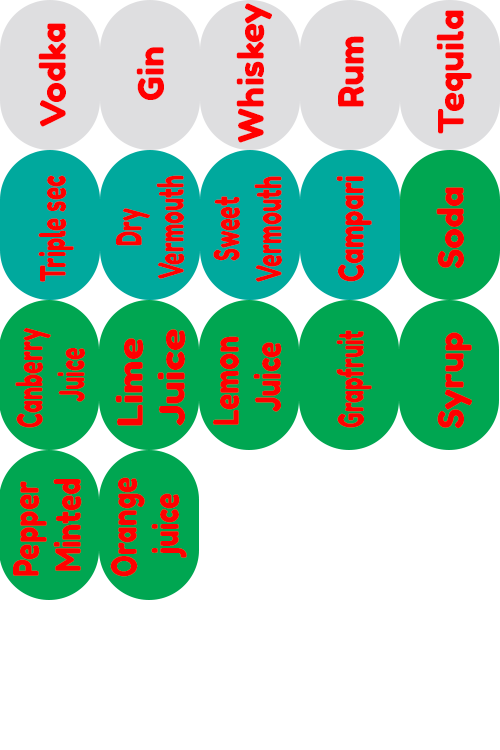
<style>
.page{position:relative;width:500px;height:750px;background:#ffffff}
.page>*{position:absolute;margin:0}
.t1{font:35px "FredokaOne-Regular";color:#ff0000}
.t2{font:35px "FredokaOne-Regular";color:#ff0000;scale:0.66 1}
.t3{font:35px "FredokaOne-Regular";color:#ff0000;scale:0.62 1}
.t4{font:35px "FredokaOne-Regular";color:#ff0000;scale:0.63 1}
.t5{font:35px "FredokaOne-Regular";color:#ff0000;scale:0.76 1}
.t6{font:35px "FredokaOne-Regular";color:#ff0000;scale:1.13 1}
.t7{font:35px "FredokaOne-Regular";color:#ff0000;scale:0.81 1}
.t8{font:35px "FredokaOne-Regular";color:#ff0000;scale:0.8 1}
</style>
<div class="page">
<p class="t1" style="left:236px;top:3px;width:36px;height:140px;rotate:-90deg">Whiskey</p>
<p class="t1" style="left:436px;top:10px;width:36px;height:124px;rotate:-90deg">Tequila</p>
<p class="t1" style="left:38px;top:23px;width:28px;height:104px;rotate:-90deg">Vodka</p>
<p class="t1" style="left:338px;top:36px;width:26px;height:71px;rotate:-90deg">Rum</p>
<p class="t1" style="left:136px;top:47px;width:28px;height:53px;rotate:-90deg">Gin</p>
<p class="t2" style="left:38px;top:175px;width:36px;height:107px;rotate:-90deg">Triple sec</p>
<p class="t3" style="left:116px;top:175px;width:69px;height:104px;text-align:center;rotate:-90deg">Dry<br>Vermouth</p>
<p class="t4" style="left:213px;top:176px;width:69px;height:106px;text-align:center;rotate:-90deg">Sweet<br>Vermouth</p>
<p class="t5" style="left:336px;top:176px;width:36px;height:106px;rotate:-90deg">Campari</p>
<p class="t1" style="left:436px;top:187px;width:28px;height:81px;rotate:-90deg">Soda</p>
<p class="t4" style="left:15px;top:328px;width:70px;height:100px;text-align:center;rotate:-90deg">Canberry <br>Juice</p>
<p class="t6" style="left:115px;top:329px;width:71px;height:97px;text-align:center;rotate:-90deg">Lime <br>Juice</p>
<p class="t7" style="left:213px;top:336px;width:69px;height:89px;text-align:center;rotate:-90deg">Lemon <br>Juice</p>
<p class="t3" style="left:336px;top:330px;width:36px;height:98px;rotate:-90deg">Grapfruit</p>
<p class="t1" style="left:437px;top:332px;width:35px;height:96px;rotate:-90deg">Syrup</p>
<p class="t7" style="left:13px;top:479px;width:69px;height:97px;text-align:center;rotate:-90deg">Pepper <br>Minted</p>
<p class="t8" style="left:110px;top:477px;width:77px;height:100px;text-align:center;rotate:-90deg">Orange <br>juice</p>
</div>
